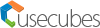
<style>
.page{position:relative;width:100px;height:28px;background:#ffffff}
.page>*{position:absolute;margin:0}
.t1{font:22.9px "KozGoPr6N-ExtraLight";letter-spacing:-0.06em;color:#606060}
</style>
<div class="page">
<p class="t1" style="left:18px;top:9px;width:82px;height:18px">usecubes</p>
</div>
